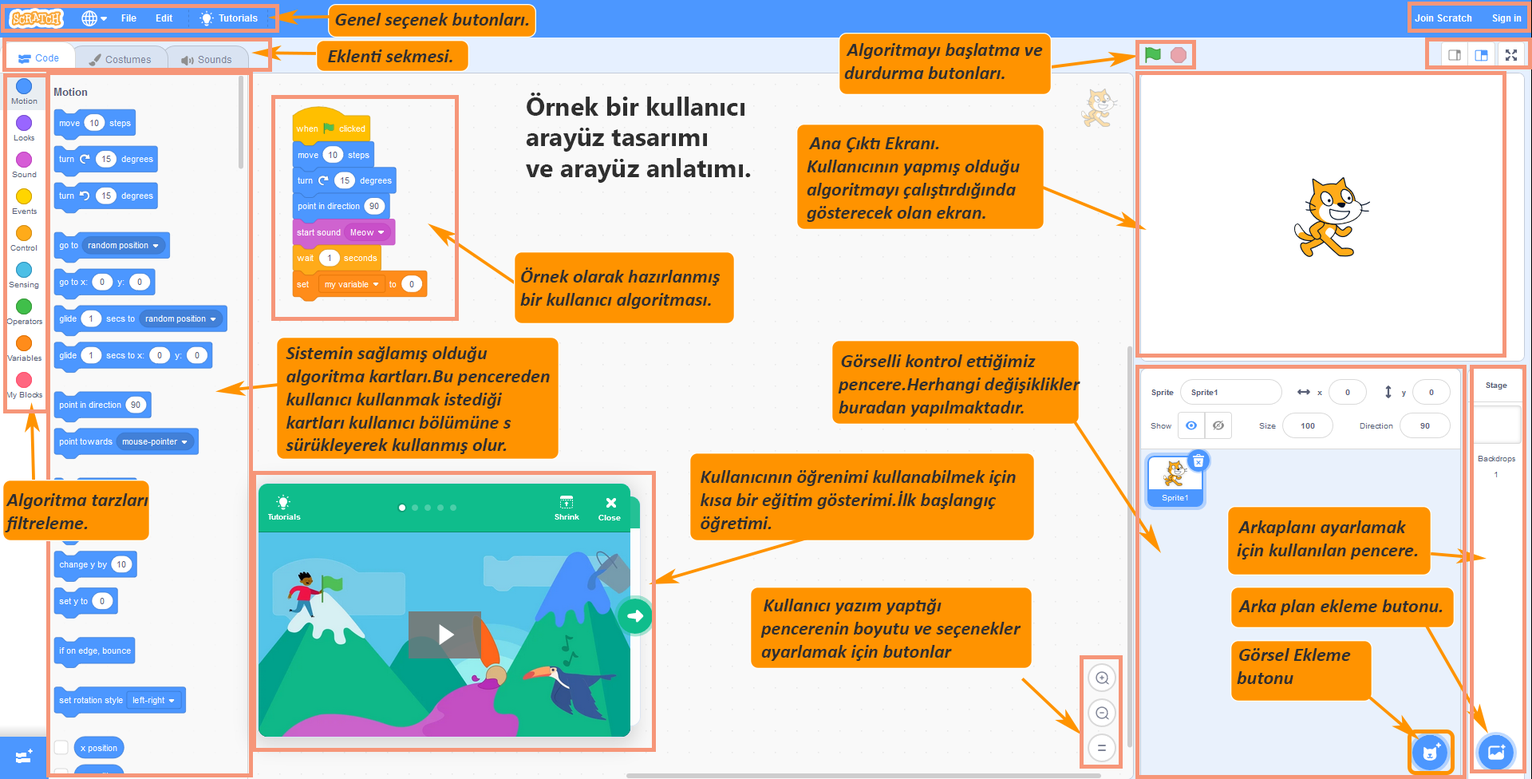
<style>
.page{position:relative;width:1532px;height:779px;background:#f9f9f9}
.page>*{position:absolute;margin:0}
.t1{font:19.1px "Calibri-BoldItalic";color:#2f2f2f}
.t2{font:25.5px "MicrosoftNewTaiLue-Bold";color:#2f2f2f}
</style>
<div class="page">
<p class="t1" style="left:335px;top:13px;width:194px;height:16px">Genel seçenek butonları.</p>
<p class="t1" style="left:328px;top:49px;width:124px;height:13px">Eklenti sekmesi.</p>
<p class="t1" style="left:844px;top:43px;width:199px;height:36px">Algoritmayı başlatma ve durdurma butonları.</p>
<p class="t2" style="left:526px;top:93px;width:225px;height:90px">Örnek bir kullanıcı <br>arayüz tasarımı<br>ve arayüz anlatımı.</p>
<p class="t1" style="left:806px;top:136px;width:213px;height:86px">Ana Çıktı Ekranı. Kullanıcının yapmış olduğu algoritmayı çalıştırdığında gösterecek olan ekran.</p>
<p class="t1" style="left:520px;top:267px;width:200px;height:42px">Örnek olarak hazırlanmış<br>bir kullanıcı algoritması.</p>
<p class="t1" style="left:286px;top:346px;width:264px;height:108px">Sistemin sağlamış olduğu<br>algoritma kartları.Bu pencereden<br>kullanıcı kullanmak istediği<br>kartları kullanıcı bölümüne s<br>sürükleyerek kullanmış olur.</p>
<p class="t1" style="left:838px;top:354px;width:242px;height:62px">Görselli kontrol ettiğimiz pencere.Herhangi değişiklikler buradan yapılmaktadır.</p>
<p class="t1" style="left:700px;top:470px;width:315px;height:62px">Kullanıcının öğrenimi kullanabilmek için<br>kısa bir eğitim gösterimi.İlk başlangıç<br>öğretimi.</p>
<p class="t1" style="left:5px;top:493px;width:143px;height:39px">Algoritma tarzları<br>filtreleme.</p>
<p class="t1" style="left:1236px;top:520px;width:182px;height:39px">Arkaplanı ayarlamak<br>için kullanılan pencere.</p>
<p class="t1" style="left:760px;top:598px;width:261px;height:62px">Kullanıcı yazım yaptığı pencerenin boyutu ve seçenekler ayarlamak için butonlar</p>
<p class="t1" style="left:1238px;top:599px;width:204px;height:16px">Arka plan ekleme butonu.</p>
<p class="t1" style="left:1236px;top:648px;width:115px;height:36px">Görsel Ekleme butonu</p>
</div>
